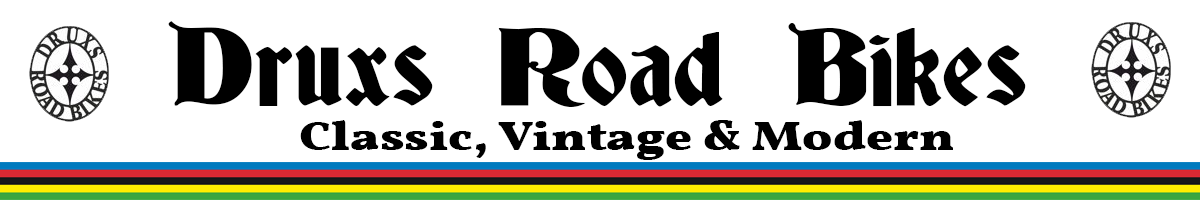
<style>
.page{position:relative;width:1200px;height:200px;background:#ffffff}
.page>*{position:absolute;margin:0}
.t1{font:100px "Deutsch-Gothic";color:#000000;scale:1.2 1}
.t2{font:41.7px "Vollkorn-Bold";color:#000000;scale:1.2 1}
</style>
<div class="page">
<p class="t1" style="left:168px;top:21px;width:858px;height:86px">Druxs Road Bikes</p>
<p class="t2" style="left:300px;top:120px;width:653px;height:40px">Classic, Vintage &amp; Modern</p>
</div>
